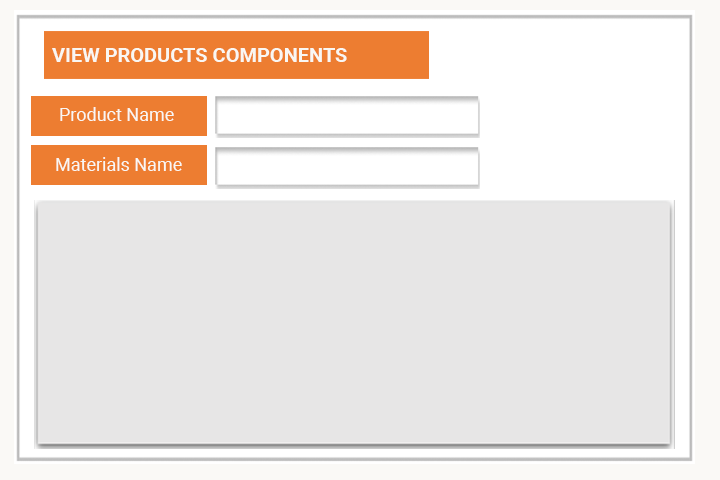
<style>
.page{position:relative;width:720px;height:480px;background:#e7e6e6}
.page>*{position:absolute;margin:0}
.t1{font:19.1px "Roboto-Bold";color:#f9f7f3;scale:1.05 1}
.t2{font:18px "Roboto-Regular";color:#f9f7f3}
</style>
<div class="page">
<p class="t1" style="left:52px;top:48px;width:295px;height:14px">VIEW PRODUCTS COMPONENTS</p>
<p class="t2" style="left:60px;top:107px;width:114px;height:14px">Product Name</p>
<p class="t2" style="left:56px;top:157px;width:126px;height:14px">Materials Name</p>
</div>
